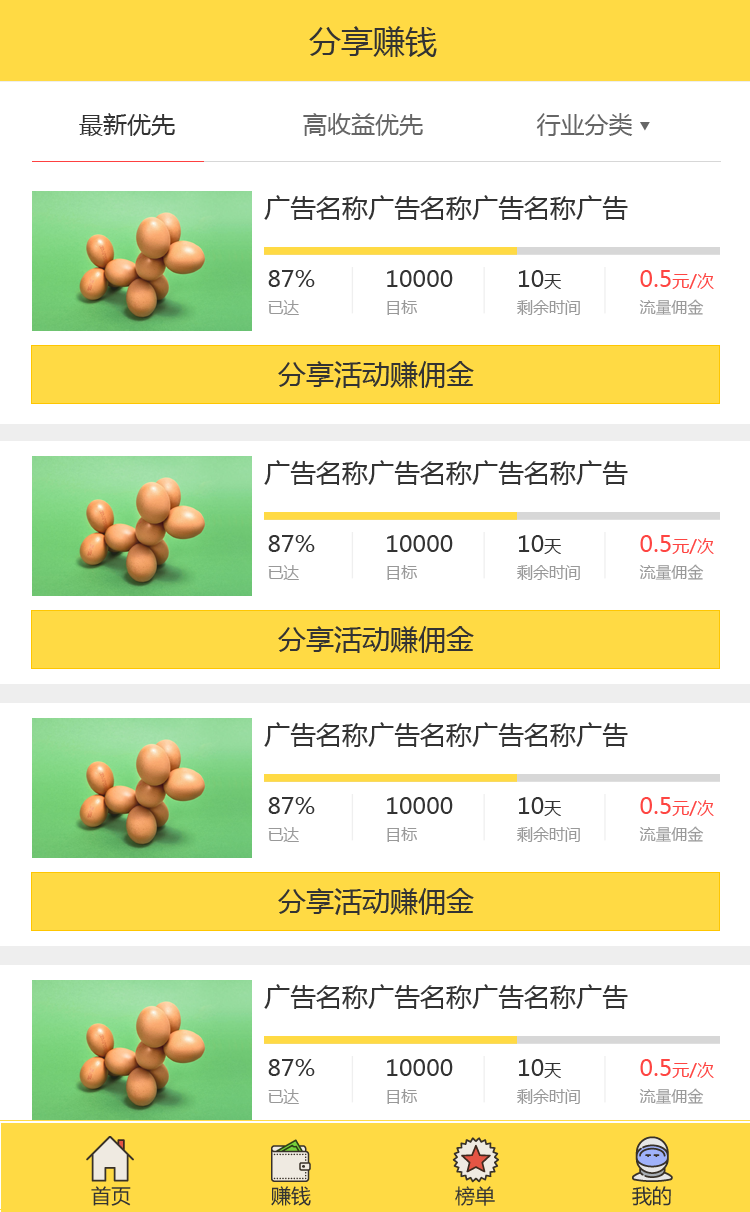
<style>
.page{position:relative;width:750px;height:1212px;background:#ffffff}
.page>*{position:absolute;margin:0}
.t1{font:32px "MicrosoftYaHei";color:#333333}
.t2{font:24px "MicrosoftYaHei";color:#666666}
.t3{font:24px "MicrosoftYaHei";color:#333333}
.t4{font:26px "MicrosoftYaHei";color:#333333}
.t5{font:23.2px/32.8px "MicrosoftYaHei";color:#333333}
.t6{font:15.9px/32.8px "MicrosoftYaHei";color:#999999}
.t7{font:17.3px/32.8px "MicrosoftYaHei";color:#333333}
.t8{font:23.2px/32.8px "MicrosoftYaHei";color:#fe4542}
.t9{font:17.3px/32.8px "MicrosoftYaHei";color:#fe4542}
.t10{font:28px "MicrosoftYaHei";color:#333333}
.t11{font:20px "MicrosoftYaHei";color:#333333}
</style>
<div class="page">
<p class="t1" style="left:309px;top:26px;width:128px;height:31px">分享赚钱</p>
<p class="t2" style="left:79px;top:113px;width:554px;height:23px"><span class="t3">最新优先                  </span>高收益优先                行业分类</p>
<p class="t4" style="left:264px;top:195px;width:364px;height:25px">广告名称广告名称广告名称广告</p>
<p class="t5" style="left:268px;top:270px;width:47px;height:45px">87%<br><span class="t6">已达</span></p>
<p class="t5" style="left:387px;top:270px;width:66px;height:45px">10000<br><span class="t6">目标</span></p>
<p class="t6" style="left:517px;top:270px;width:63px;height:45px"><span class="t5">10</span><span class="t7">天<br></span>剩余时间</p>
<p class="t6" style="left:639px;top:270px;width:75px;height:45px"><span class="t8">0.5</span><span class="t9">元/次<br></span>流量佣金</p>
<p class="t10" style="left:278px;top:361px;width:196px;height:27px">分享活动赚佣金</p>
<p class="t11" style="left:91px;top:1186px;width:40px;height:20px">首页</p>
<p class="t11" style="left:271px;top:1186px;width:40px;height:20px">赚钱</p>
<p class="t11" style="left:455px;top:1186px;width:40px;height:20px">榜单</p>
<p class="t11" style="left:632px;top:1186px;width:39px;height:20px">我的</p>
</div>
